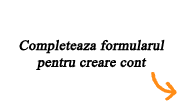
<style>
.page{position:relative;width:184px;height:102px;background:#ffffff}
.page>*{position:absolute;margin:0}
.t1{font:14px "IskoolaPota";color:#010101;font-weight:bold;font-style:italic}
</style>
<div class="page">
<p class="t1" style="left:19px;top:39px;width:146px;height:31px;text-align:center">Completeaza formularul<br>pentru creare cont</p>
</div>
